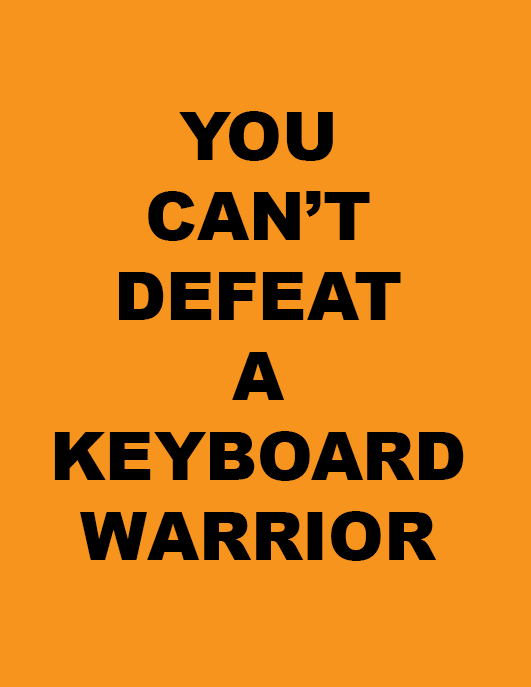
<style>
.page{position:relative;width:531px;height:687px;background:#f7941d}
.page>*{position:absolute;margin:0}
.t1{font:66.7px "Arial-Black";color:#000000}
</style>
<div class="page">
<p class="t1" style="left:54px;top:111px;width:410px;height:450px;text-align:center">YOU<br>CAN’T<br>DEFEAT<br>A <br>KEYBOARD<br>WARRIOR</p>
</div>
